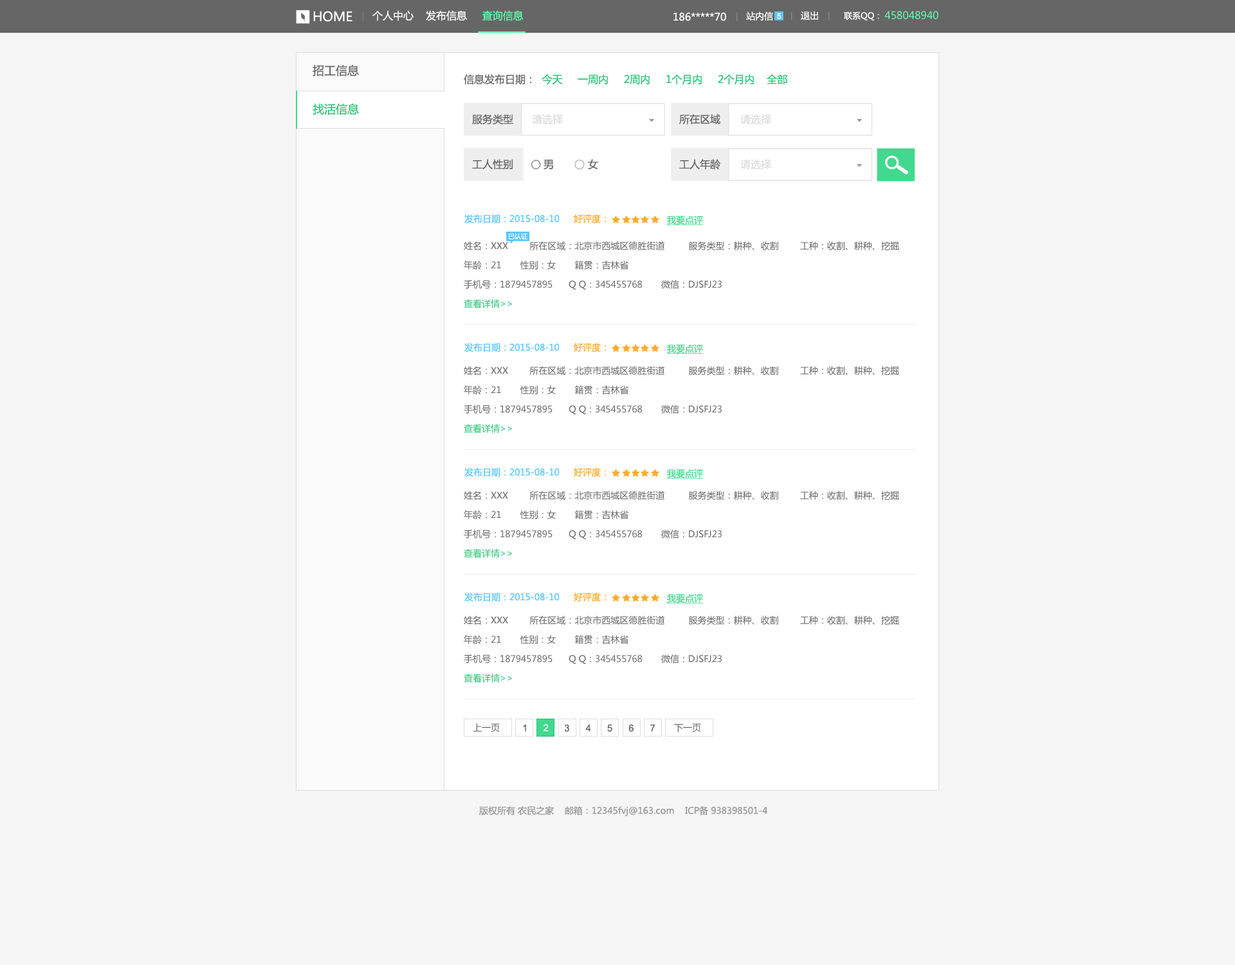
<style>
.page{position:relative;width:1235px;height:965px;background:#f5f5f5}
.page>*{position:absolute;margin:0}
.t1{font:12.9px "MicrosoftYaHei";color:#ffffff;text-transform:uppercase}
.t2{font:10.3px "MicrosoftYaHei";color:#ffffff;text-transform:uppercase}
.t3{font:10.3px "MicrosoftYaHei";color:#60fdaf;text-transform:uppercase}
.t4{font:9px "MicrosoftYaHei";color:#ffffff;text-transform:uppercase}
.t5{font:7.7px "ArialMT";color:#ffffff;text-transform:uppercase;font-weight:bold}
.t6{font:8.4px "MicrosoftYaHei";color:#ffffff;text-transform:uppercase}
.t7{font:11.6px/38.6px "MicrosoftYaHei";color:#666666;text-transform:uppercase}
.t8{font:11.6px/38.6px "MicrosoftYaHei";color:#2fc479;text-transform:uppercase}
.t9{font:10.3px "MicrosoftYaHei";color:#2fc479;text-transform:uppercase}
.t10{font:10.3px "MicrosoftYaHei";color:#666666;text-transform:uppercase}
.t11{font:10.3px "MicrosoftYaHei";color:#dddddd;text-transform:uppercase}
.t12{font:10.3px "MicrosoftYaHei";color:#666666}
.t13{font:9px "MicrosoftYaHei";color:#5cc7fc;text-transform:uppercase}
.t14{font:9px "MicrosoftYaHei";color:#ffab2e;text-transform:uppercase}
.t15{font:9px "MicrosoftYaHei";color:#42d88d;text-transform:uppercase;text-decoration:underline}
.t16{font:6.4px "MicrosoftYaHei";color:#ffffff;text-transform:uppercase}
.t17{font:9px/19.3px "MicrosoftYaHei";color:#666666;text-transform:uppercase}
.t18{font:9px/19.3px "MicrosoftYaHei";color:#2fc479;text-transform:uppercase}
.t19{font:9px "MicrosoftYaHei";color:#666666;text-transform:uppercase}
.t20{font:9.7px "ArialMT";color:#666666;text-transform:uppercase}
.t21{font:9.7px "ArialMT";letter-spacing:-0.02em;color:#666666;text-transform:uppercase}
.t22{font:9.7px "ArialMT";color:#ffffff;text-transform:uppercase}
.t23{font:9px "MicrosoftYaHei";color:#999999}
</style>
<div class="page">
<p class="t1" style="left:313px;top:11px;width:40px;height:11px">home</p>
<p class="t2" style="left:373px;top:10px;width:151px;height:11px">个人中心    发布信息     <span class="t3">查询信息</span></p>
<p class="t2" style="left:674px;top:12px;width:52px;height:9px">186*****70</p>
<p class="t4" style="left:746px;top:12px;width:27px;height:9px">站内信</p>
<p class="t5" style="left:777px;top:13px;width:5px;height:6px">5</p>
<p class="t4" style="left:801px;top:11px;width:17px;height:9px">退出</p>
<p class="t6" style="left:844px;top:12px;width:36px;height:9px">联系qq：</p>
<p class="t3" style="left:885px;top:11px;width:54px;height:8px">458048940</p>
<p class="t7" style="left:313px;top:64px;width:46px;height:51px">招工信息<br><span class="t8">找活信息</span></p>
<p class="t9" style="left:464px;top:74px;width:324px;height:11px"><span class="t10">信息发布日期：  </span>今天     一周内     2周内     1个月内     2个月内    全部</p>
<p class="t10" style="left:472px;top:114px;width:41px;height:11px">服务类型</p>
<p class="t11" style="left:532px;top:114px;width:31px;height:10px">请选择</p>
<p class="t10" style="left:679px;top:114px;width:42px;height:11px">所在区域</p>
<p class="t11" style="left:741px;top:114px;width:31px;height:10px">请选择</p>
<p class="t10" style="left:472px;top:159px;width:41px;height:11px">工人性别</p>
<p class="t12" style="left:544px;top:160px;width:9px;height:10px">男</p>
<p class="t12" style="left:588px;top:159px;width:10px;height:11px">女</p>
<p class="t10" style="left:679px;top:159px;width:42px;height:11px">工人年龄</p>
<p class="t11" style="left:741px;top:159px;width:31px;height:10px">请选择</p>
<p class="t13" style="left:465px;top:214px;width:95px;height:9px">发布日期：2015-08-10</p>
<p class="t14" style="left:574px;top:214px;width:32px;height:9px">好评度：</p>
<p class="t15" style="left:667px;top:216px;width:37px;height:9px">我要点评</p>
<p class="t16" style="left:508px;top:233px;width:20px;height:7px">已认证</p>
<p class="t17" style="left:464px;top:241px;width:435px;height:67px">姓名：XXX        所在区域：北京市西城区德胜街道         服务类型：耕种、收割        工种：收割、耕种、挖掘<br>年龄：21       性别：女       籍贯：吉林省    <br>手机号：1879457895      q q：345455768       微信：djsfj23<br><span class="t18">查看详情&gt;&gt;</span></p>
<p class="t13" style="left:465px;top:343px;width:95px;height:9px">发布日期：2015-08-10</p>
<p class="t14" style="left:574px;top:343px;width:32px;height:9px">好评度：</p>
<p class="t15" style="left:667px;top:344px;width:37px;height:10px">我要点评</p>
<p class="t17" style="left:464px;top:366px;width:435px;height:67px">姓名：XXX        所在区域：北京市西城区德胜街道         服务类型：耕种、收割        工种：收割、耕种、挖掘<br>年龄：21       性别：女       籍贯：吉林省    <br>手机号：1879457895      q q：345455768       微信：djsfj23<br><span class="t18">查看详情&gt;&gt;</span></p>
<p class="t13" style="left:465px;top:468px;width:95px;height:9px">发布日期：2015-08-10</p>
<p class="t14" style="left:574px;top:468px;width:32px;height:9px">好评度：</p>
<p class="t15" style="left:667px;top:469px;width:37px;height:10px">我要点评</p>
<p class="t17" style="left:464px;top:491px;width:435px;height:67px">姓名：XXX        所在区域：北京市西城区德胜街道         服务类型：耕种、收割        工种：收割、耕种、挖掘<br>年龄：21       性别：女       籍贯：吉林省    <br>手机号：1879457895      q q：345455768       微信：djsfj23<br><span class="t18">查看详情&gt;&gt;</span></p>
<p class="t13" style="left:465px;top:593px;width:95px;height:9px">发布日期：2015-08-10</p>
<p class="t14" style="left:574px;top:593px;width:32px;height:9px">好评度：</p>
<p class="t15" style="left:667px;top:594px;width:37px;height:10px">我要点评</p>
<p class="t17" style="left:464px;top:616px;width:435px;height:67px">姓名：XXX        所在区域：北京市西城区德胜街道         服务类型：耕种、收割        工种：收割、耕种、挖掘<br>年龄：21       性别：女       籍贯：吉林省    <br>手机号：1879457895      q q：345455768       微信：djsfj23<br><span class="t18">查看详情&gt;&gt;</span></p>
<p class="t19" style="left:473px;top:723px;width:27px;height:9px">上一页</p>
<p class="t20" style="left:523px;top:725px;width:133px;height:7px"><span class="t21">1    </span>          3      4      5      6      7</p>
<p class="t22" style="left:543px;top:724px;width:6px;height:8px">2</p>
<p class="t19" style="left:674px;top:724px;width:27px;height:8px">下一页</p>
<p class="t23" style="left:479px;top:806px;width:289px;height:11px">版权所有 农民之家    邮箱：12345fvj@163.com    ICP备 938398501-4</p>
</div>
